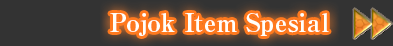
<style>
.page{position:relative;width:393px;height:46px;background:#333333}
.page>*{position:absolute;margin:0}
.t1{font:25px "RyuminPro-ExBold";color:#fffffa}
</style>
<div class="page">
<p class="t1" style="left:110px;top:13px;width:219px;height:23px">Pojok Item Spesial</p>
</div>
